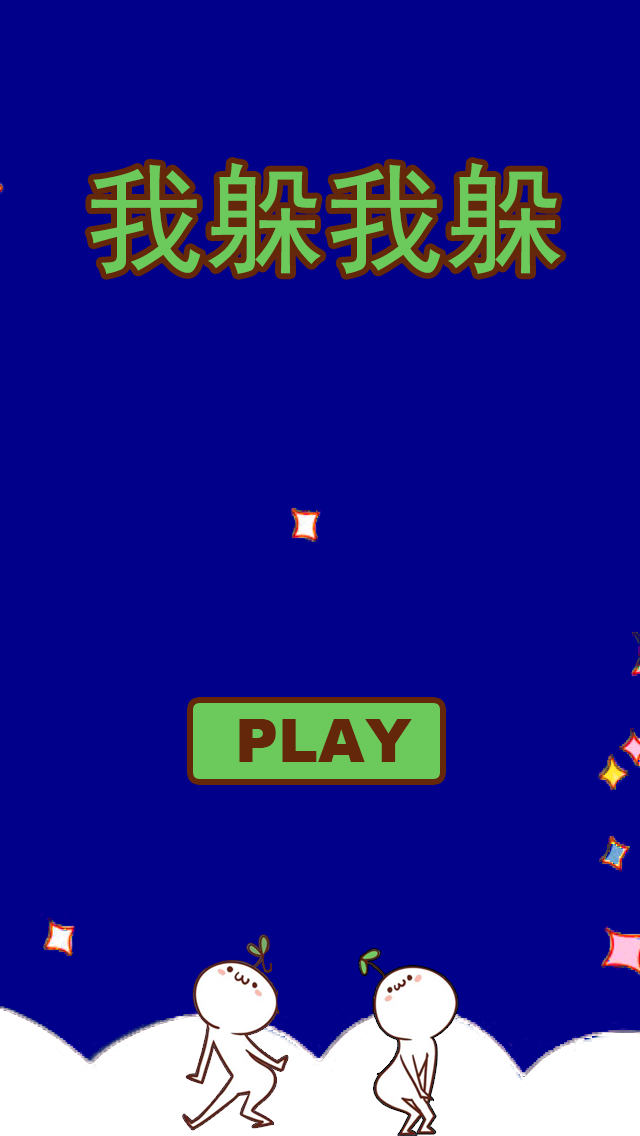
<style>
.page{position:relative;width:640px;height:1136px;background:#00008b}
.page>*{position:absolute;margin:0}
.t1{font:120px "SimHei";color:#6cca5c}
.t2{font:60px "Arial-Black";color:#652709}
</style>
<div class="page">
<p class="t1" style="left:90px;top:163px;width:471px;height:111px">我躲我躲</p>
<p class="t2" style="left:239px;top:719px;width:173px;height:43px">PLAY</p>
</div>
